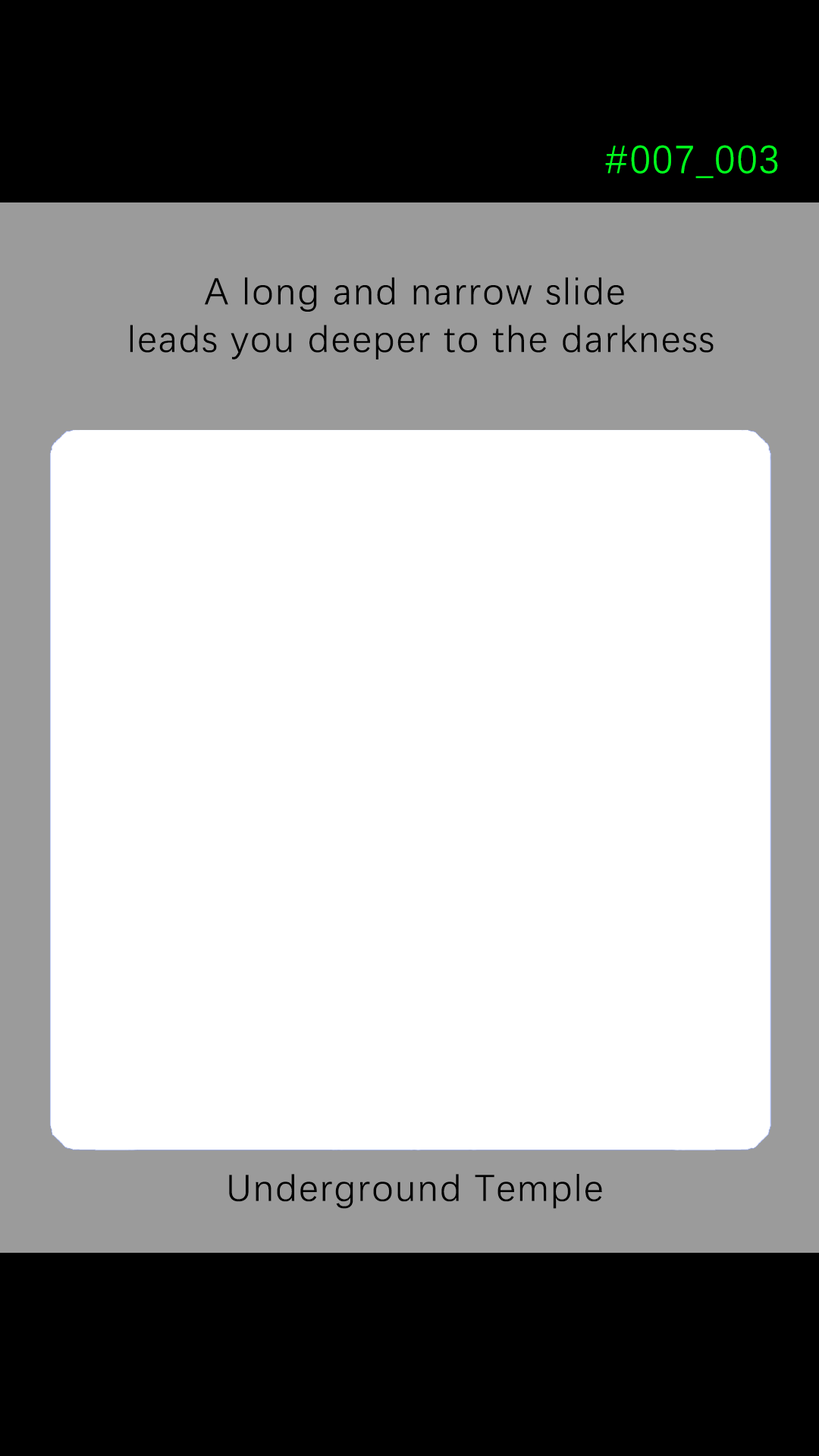
<style>
.page{position:relative;width:819px;height:1456px;background:#ffffff}
.page>*{position:absolute;margin:0}
.t1{font:39.2px "DengXian-Regular";letter-spacing:0.04em;color:#00ff1e}
.t2{font:37.9px/47.6px "DengXian-Regular";letter-spacing:0.04em;color:#000000}
.t3{font:37.9px "DengXian-Regular";letter-spacing:0.04em;color:#000000}
</style>
<div class="page">
<p class="t1" style="left:605px;top:145px;width:173px;height:33px">#007_003</p>
<p class="t2" style="left:130px;top:277px;width:584px;height:82px;text-align:center">A long and narrow slide <br>leads you deeper to the darkness</p>
<p class="t3" style="left:229px;top:1174px;width:373px;height:35px">Underground Temple</p>
</div>
